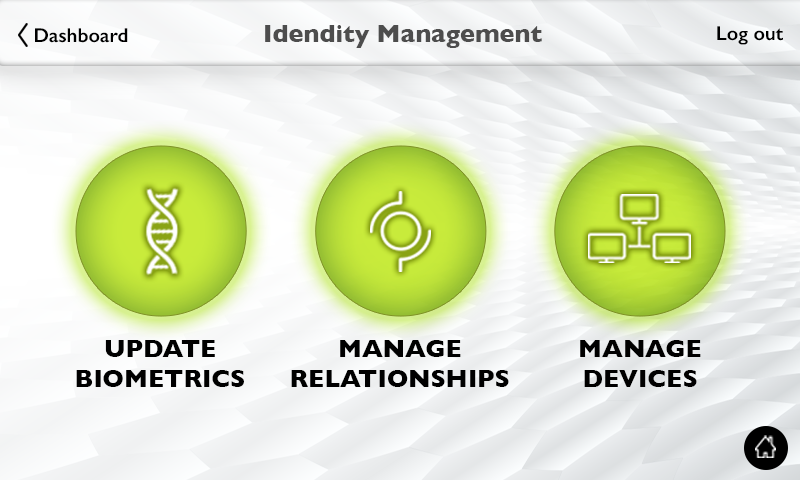
<style>
.page{position:relative;width:800px;height:480px}
.page>*{position:absolute;margin:0}
.t1{font:20px "GillSans-SemiBold";color:#000000}
.t2{font:25px "GillSans-Bold";color:#4d4d4d}
.t3{font:25px/30px "GillSans-Bold";color:#000000;text-transform:uppercase}
</style>
<div class="page">
<p class="t1" style="left:35px;top:28px;width:93px;height:15px">Dashboard</p>
<p class="t2" style="left:265px;top:25px;width:277px;height:23px">Idendity Management</p>
<p class="t1" style="left:717px;top:26px;width:66px;height:19px">Log out</p>
<p class="t3" style="left:76px;top:340px;width:168px;height:47px;text-align:center">Update<br>Biometrics</p>
<p class="t3" style="left:291px;top:340px;width:218px;height:47px;text-align:center">Manage<br>Relationships</p>
<p class="t3" style="left:580px;top:340px;width:121px;height:47px;text-align:center">Manage<br>Devices</p>
</div>
